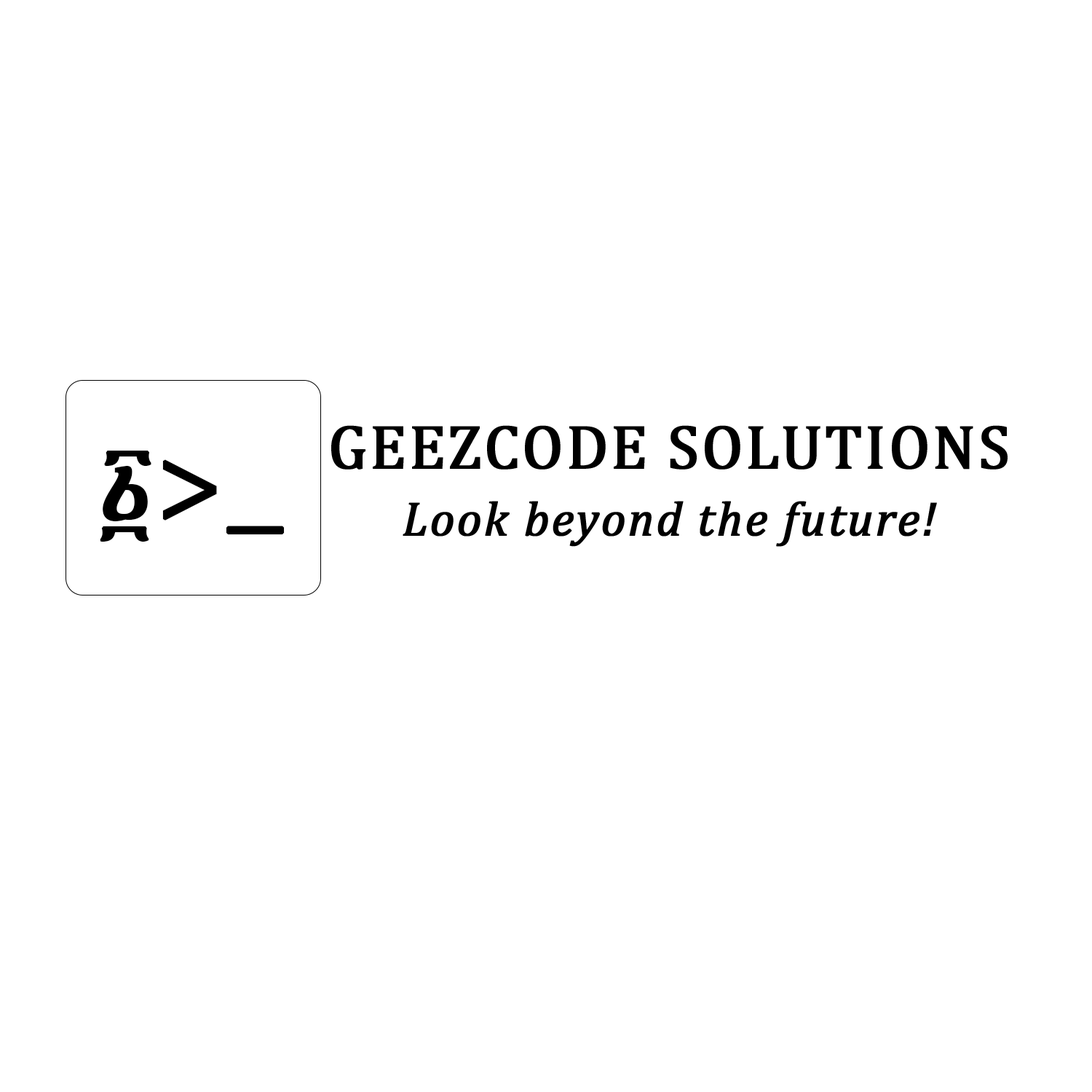
<style>
.page{position:relative;width:1092px;height:1092px;background:#ffffff}
.page>*{position:absolute;margin:0}
.t1{font:62.7px "Cambria";letter-spacing:0.025em;color:#000000;font-weight:bold}
.t2{font:109.2px "MyriadPro-Regular";letter-spacing:0.025em;color:#000000;font-weight:bold}
.t3{font:109.2px "Nyala-Regular";letter-spacing:0.025em;color:#000000;font-weight:bold}
.t4{font:48.5px "Cambria-Italic";letter-spacing:0.025em;color:#000000;font-weight:bold}
</style>
<div class="page">
<p class="t1" style="left:331px;top:425px;width:677px;height:45px">GEEZCODE SOLUTIONS</p>
<p class="t2" style="left:100px;top:450px;width:185px;height:92px"><span class="t3">፩</span>&gt;_</p>
<p class="t4" style="left:403px;top:501px;width:534px;height:46px">Look beyond the future!</p>
</div>
